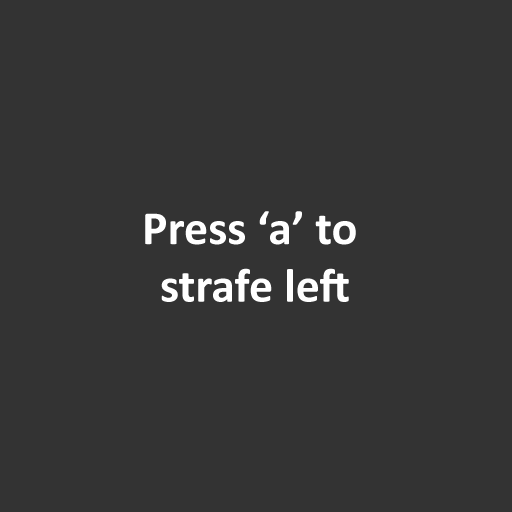
<style>
.page{position:relative;width:512px;height:512px;background:#333333}
.page>*{position:absolute;margin:0}
.t1{font:48px "Calibri-Bold";color:#ffffff}
</style>
<div class="page">
<p class="t1" style="left:145px;top:211px;width:211px;height:91px;text-align:center">Press ‘a’ to <br>strafe left</p>
</div>
